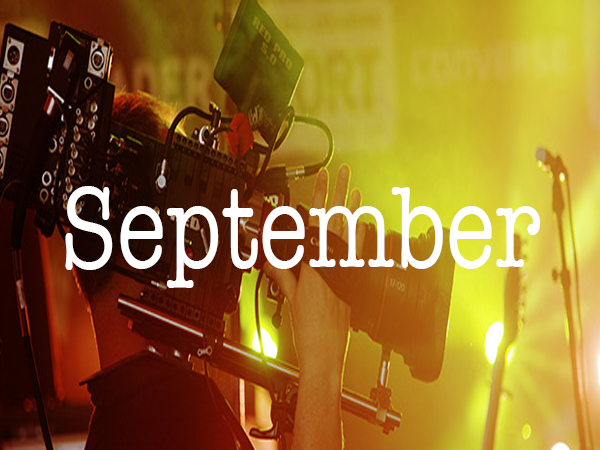
<style>
.page{position:relative;width:600px;height:450px}
.page>*{position:absolute;margin:0}
.t1{font:118px "AmericanTypewriter";color:#ffffff;scale:0.78 1}
</style>
<div class="page">
<p class="t1" style="left:65px;top:186px;width:475px;height:102px">September</p>
</div>
